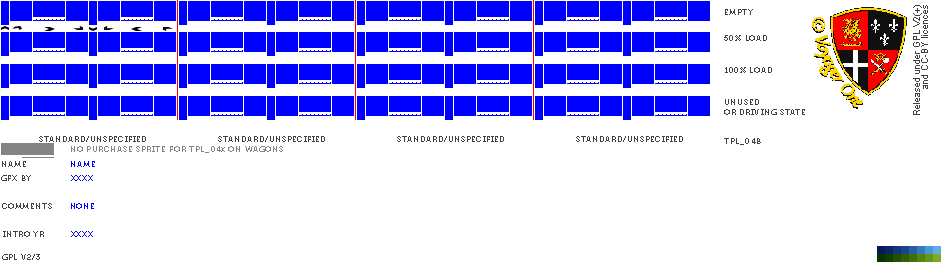
<style>
.page{position:relative;width:950px;height:270px;background:#ffffff}
.page>*{position:absolute;margin:0}
.t1{font:8px "Museo700-Regular";letter-spacing:0.075em;color:#404040;text-transform:uppercase}
.t2{font:8px "Museo700-Regular";letter-spacing:0.075em;color:#848484;text-transform:uppercase}
.t3{font:6px "Museo700-Regular";letter-spacing:0.075em;color:#848484;text-transform:uppercase}
.t4{font:8px "Museo700-Regular";letter-spacing:0.075em;color:#0000ff;text-transform:uppercase}
</style>
<div class="page">
<p class="t1" style="left:725px;top:9px;width:28px;height:6px">EMPTY</p>
<p class="t1" style="left:724px;top:35px;width:43px;height:6px">50% LOAD</p>
<p class="t1" style="left:725px;top:67px;width:47px;height:6px">100% LOAD</p>
<p class="t1" style="left:724px;top:99px;width:81px;height:16px">unused<br>or driving state</p>
<p class="t1" style="left:39px;top:136px;width:107px;height:6px">standard/unspecified</p>
<p class="t1" style="left:218px;top:136px;width:107px;height:6px">standard/unspecified</p>
<p class="t1" style="left:397px;top:136px;width:107px;height:6px">standard/unspecified</p>
<p class="t1" style="left:576px;top:136px;width:107px;height:6px">standard/unspecified</p>
<p class="t2" style="left:71px;top:146px;width:212px;height:7px">no purchase sprite for tpl_04<span class="t3">x</span> on wagons</p>
<p class="t1" style="left:724px;top:138px;width:37px;height:7px">tpl_04B</p>
<p class="t1" style="left:2px;top:161px;width:24px;height:6px">name</p>
<p class="t4" style="left:71px;top:161px;width:24px;height:6px">name</p>
<p class="t1" style="left:1px;top:175px;width:30px;height:6px">gfx by</p>
<p class="t4" style="left:71px;top:175px;width:22px;height:6px">xxxx</p>
<p class="t1" style="left:2px;top:203px;width:50px;height:6px">comments</p>
<p class="t4" style="left:71px;top:203px;width:23px;height:6px">none</p>
<p class="t1" style="left:3px;top:231px;width:41px;height:6px">intro yr</p>
<p class="t4" style="left:71px;top:231px;width:22px;height:6px">xxxx</p>
<p class="t1" style="left:2px;top:254px;width:38px;height:6px">gpl v2/3</p>
</div>
